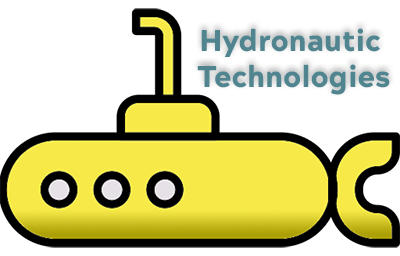
<style>
.page{position:relative;width:400px;height:256px;background:#ffffff}
.page>*{position:absolute;margin:0}
.t1{font:30px "AcherusGrotesqueBlack";color:#508590}
</style>
<div class="page">
<p class="t1" style="left:197px;top:28px;width:193px;height:67px;text-align:center">Hydronautic <br>Technologies</p>
</div>
